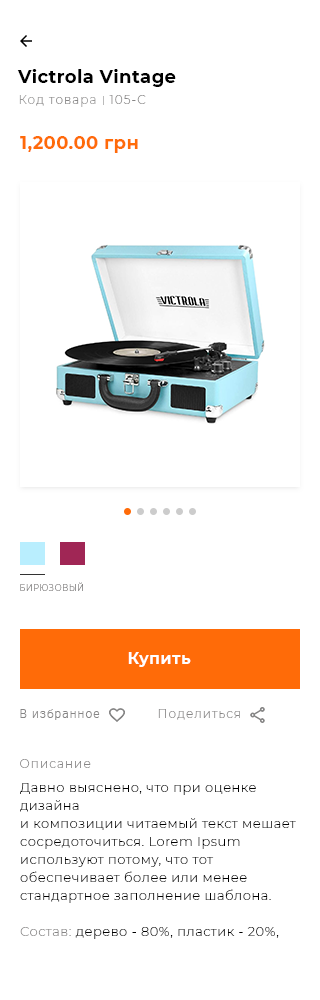
<style>
.page{position:relative;width:320px;height:1000px;background:#ffffff}
.page>*{position:absolute;margin:0}
.t1{font:18px "Montserrat-Bold";letter-spacing:0.02em;color:#000000}
.t2{font:12px "Montserrat-Light";letter-spacing:0.09em;color:#878686}
.t3{font:12px "Montserrat-Light";letter-spacing:0.09em;color:#989797}
.t4{font:18px "Montserrat-Bold";letter-spacing:0.02em;color:#ff6b08}
.t5{font:8px "Montserrat-Light";letter-spacing:0.09em;color:#878686;text-transform:uppercase}
.t6{font:16px "Montserrat-Bold";letter-spacing:0.02em;color:#ffffff}
.t7{font:12px "Roboto-Light";letter-spacing:0.09em;color:#878686}
.t8{font:13px/18px "Montserrat-Light";letter-spacing:0.04em;color:#000000}
.t9{font:13px/18px "Montserrat-Light";letter-spacing:0.04em;color:#878686}
</style>
<div class="page">
<p class="t1" style="left:17px;top:69px;width:159px;height:18px">Victrola Vintage</p>
<p class="t2" style="left:19px;top:95px;width:77px;height:12px"><span class="t3">Ко</span>д това<span class="t3">ра</span></p>
<p class="t2" style="left:109px;top:95px;width:37px;height:9px">105-C</p>
<p class="t4" style="left:20px;top:136px;width:118px;height:17px">1,200.00 грн</p>
<p class="t5" style="left:20px;top:582px;width:63px;height:9px">БИРЮЗОВЫЙ</p>
<p class="t6" style="left:128px;top:652px;width:63px;height:15px">Купить</p>
<p class="t7" style="left:20px;top:709px;width:80px;height:11px">В избранное</p>
<p class="t2" style="left:158px;top:709px;width:82px;height:11px">Поделиться</p>
<p class="t2" style="left:20px;top:759px;width:71px;height:9px">Описание</p>
<p class="t8" style="left:20px;top:783px;width:276px;height:156px">Давно выяснено, что при оценке дизайна <br>и композиции читаемый текст мешает сосредоточиться. Lorem Ipsum используют потому, что тот обеспечивает более или менее стандартное заполнение шаблона.<br><br><span class="t9">Состав: </span>дерево - 80%, пластик - 20%,</p>
</div>
